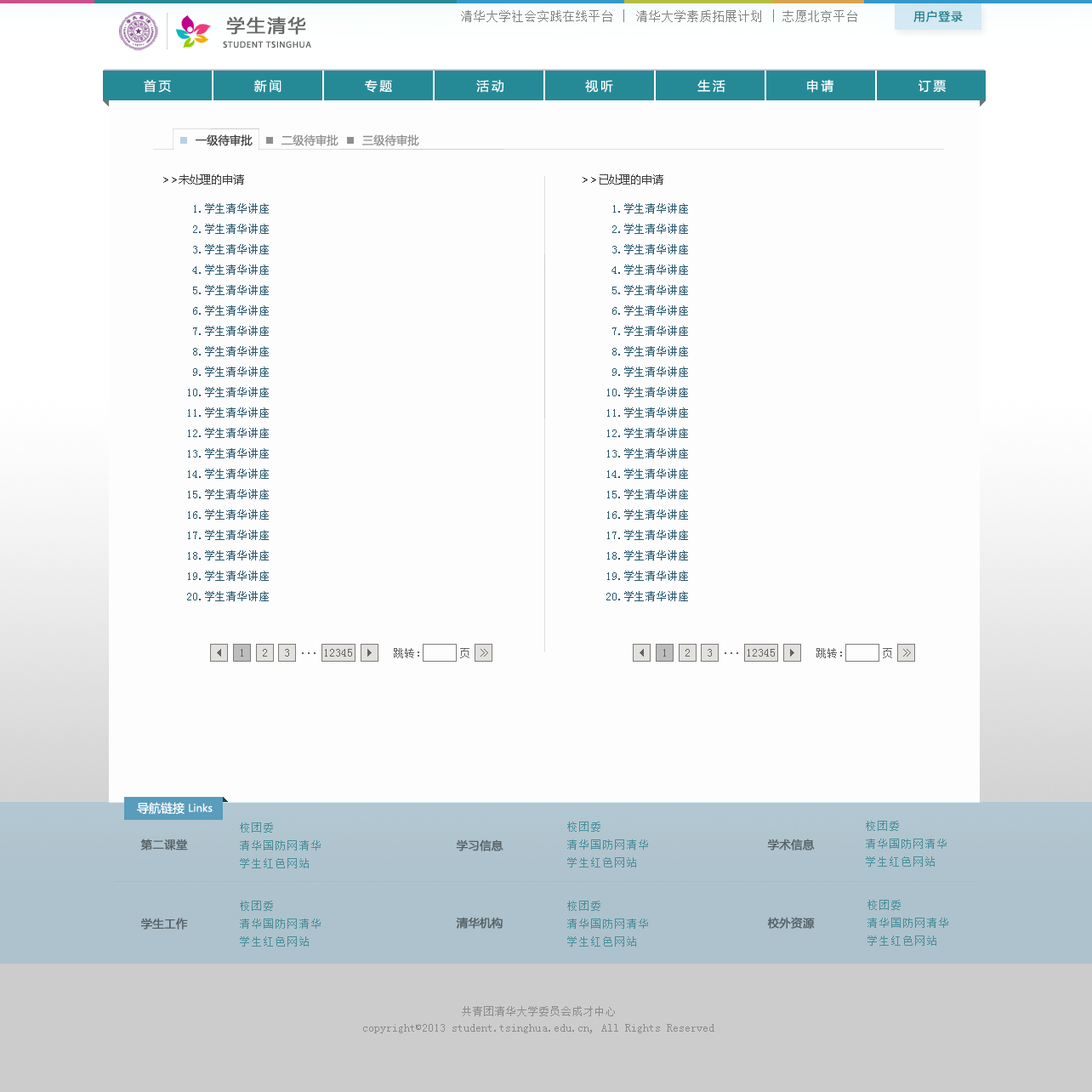
<style>
.page{position:relative;width:1092px;height:1092px;background:#fdfdfd}
.page>*{position:absolute;margin:0}
.t1{font:18.1px "MicrosoftYaHei";letter-spacing:0.1em;color:#666666;font-weight:bold}
.t2{font:11.9px "SimSun";letter-spacing:0.075em;color:#808080}
.t3{font:12.5px "SimSun";letter-spacing:0.075em;color:#808080}
.t4{font:11.3px "MicrosoftYaHei";letter-spacing:0.1em;color:#237e89}
.t5{font:9.1px "MyriadPro-Regular";letter-spacing:0.075em;color:#666666}
.t6{font:12.5px "MicrosoftYaHei";letter-spacing:0.2em;color:#ffffff}
.t7{font:11.3px "MicrosoftYaHei";color:#404040}
.t8{font:11.3px "MicrosoftYaHei";color:#8f8f8f}
.t9{font:11.3px "MicrosoftYaHei";letter-spacing:-0.01em;color:#404040}
.t10{font:11.3px/20.4px "SimSun";letter-spacing:-0.01em;color:#29586e}
.t11{font:11.3px "SimSun";color:#636363}
.t12{font:10.2px "MicrosoftYaHei";color:#ffffff}
.t13{font:11.9px "MicrosoftYaHei";color:#ffffff}
.t14{font:11.3px/18.1px "SimSun";letter-spacing:0.075em;color:#478d9a}
.t15{font:11.3px "MicrosoftYaHei";color:#586267;font-weight:bold}
.t16{font:11.3px/18.1px "SimSun";letter-spacing:0.075em;color:#478d99}
.t17{font:11.3px "MicrosoftYaHei";color:#566166;font-weight:bold}
.t18{font:11.3px/15.9px "SimSun";color:#8a8a8a}
</style>
<div class="page">
<p class="t1" style="left:226px;top:16px;width:80px;height:19px">学生清华</p>
<p class="t2" style="left:461px;top:9px;width:396px;height:13px">清华大学社会实践在线平台 <span class="t3">| </span>清华大学素质拓展计划 <span class="t3">| </span>志愿北京平台</p>
<p class="t4" style="left:913px;top:10px;width:50px;height:12px">用户登录</p>
<p class="t5" style="left:223px;top:41px;width:88px;height:7px">STUDENT TSINGHUA</p>
<p class="t6" style="left:144px;top:79px;width:27px;height:14px">首页</p>
<p class="t6" style="left:254px;top:79px;width:28px;height:14px">新闻</p>
<p class="t6" style="left:365px;top:80px;width:27px;height:13px">专题</p>
<p class="t6" style="left:476px;top:80px;width:27px;height:13px">活动</p>
<p class="t6" style="left:585px;top:80px;width:28px;height:13px">视听</p>
<p class="t6" style="left:697px;top:79px;width:28px;height:14px">生活</p>
<p class="t6" style="left:807px;top:79px;width:26px;height:14px">申请</p>
<p class="t6" style="left:918px;top:80px;width:28px;height:12px">订票</p>
<p class="t7" style="left:196px;top:134px;width:57px;height:12px">一级待审批</p>
<p class="t8" style="left:282px;top:134px;width:56px;height:12px">二级待审批</p>
<p class="t8" style="left:362px;top:134px;width:57px;height:12px">三级待审批</p>
<p class="t9" style="left:163px;top:174px;width:81px;height:11px">&gt;&gt;未处理的申请</p>
<p class="t9" style="left:583px;top:174px;width:80px;height:11px">&gt;&gt;已处理的申请</p>
<p class="t10" style="left:187px;top:203px;width:82px;height:398px">1.学生清华讲座<br> 2.学生清华讲座<br> 3.学生清华讲座<br> 4.学生清华讲座<br> 5.学生清华讲座<br> 6.学生清华讲座<br> 7.学生清华讲座<br> 8.学生清华讲座<br> 9.学生清华讲座<br>10.学生清华讲座<br>11.学生清华讲座<br>12.学生清华讲座<br>13.学生清华讲座<br>14.学生清华讲座<br>15.学生清华讲座<br>16.学生清华讲座<br>17.学生清华讲座<br>18.学生清华讲座<br>19.学生清华讲座<br>20.学生清华讲座</p>
<p class="t10" style="left:606px;top:203px;width:82px;height:398px">1.学生清华讲座<br> 2.学生清华讲座<br> 3.学生清华讲座<br> 4.学生清华讲座<br> 5.学生清华讲座<br> 6.学生清华讲座<br> 7.学生清华讲座<br> 8.学生清华讲座<br> 9.学生清华讲座<br>10.学生清华讲座<br>11.学生清华讲座<br>12.学生清华讲座<br>13.学生清华讲座<br>14.学生清华讲座<br>15.学生清华讲座<br>16.学生清华讲座<br>17.学生清华讲座<br>18.学生清华讲座<br>19.学生清华讲座<br>20.学生清华讲座</p>
<p class="t11" style="left:241px;top:649px;width:2px;height:8px">1</p>
<p class="t11" style="left:263px;top:649px;width:4px;height:8px">2</p>
<p class="t11" style="left:285px;top:649px;width:4px;height:8px">3</p>
<p class="t11" style="left:302px;top:652px;width:14px;height:2px">...</p>
<p class="t11" style="left:325px;top:649px;width:27px;height:8px">12345</p>
<p class="t11" style="left:394px;top:648px;width:25px;height:10px">跳转：</p>
<p class="t11" style="left:460px;top:648px;width:9px;height:10px">页</p>
<p class="t11" style="left:663px;top:649px;width:3px;height:8px">1</p>
<p class="t11" style="left:685px;top:649px;width:5px;height:8px">2</p>
<p class="t11" style="left:708px;top:649px;width:4px;height:8px">3</p>
<p class="t11" style="left:725px;top:652px;width:13px;height:2px">...</p>
<p class="t11" style="left:748px;top:649px;width:27px;height:8px">12345</p>
<p class="t11" style="left:816px;top:648px;width:26px;height:10px">跳转：</p>
<p class="t11" style="left:883px;top:648px;width:9px;height:10px">页</p>
<p class="t12" style="left:137px;top:802px;width:76px;height:13px"><span class="t13">导航链接 </span>Links</p>
<p class="t14" style="left:567px;top:822px;width:81px;height:45px">校团委<br>清华国防网清华<br>学生红色网站</p>
<p class="t14" style="left:866px;top:821px;width:81px;height:46px">校团委<br>清华国防网清华<br>学生红色网站</p>
<p class="t14" style="left:240px;top:822px;width:81px;height:46px">校团委<br>清华国防网清华<br>学生红色网站</p>
<p class="t15" style="left:140px;top:839px;width:48px;height:11px">第二课堂</p>
<p class="t15" style="left:456px;top:839px;width:47px;height:12px">学习信息</p>
<p class="t15" style="left:767px;top:839px;width:48px;height:11px">学术信息</p>
<p class="t16" style="left:240px;top:901px;width:81px;height:46px">校团委<br>清华国防网清华<br>学生红色网站</p>
<p class="t16" style="left:567px;top:901px;width:81px;height:46px">校团委<br>清华国防网清华<br>学生红色网站</p>
<p class="t16" style="left:867px;top:900px;width:81px;height:46px">校团委<br>清华国防网清华<br>学生红色网站</p>
<p class="t17" style="left:140px;top:918px;width:48px;height:12px">学生工作</p>
<p class="t17" style="left:456px;top:917px;width:47px;height:12px">清华机构</p>
<p class="t17" style="left:767px;top:917px;width:48px;height:12px">校外资源</p>
<p class="t18" style="left:363px;top:1006px;width:351px;height:27px;text-align:center">共青团清华大学委员会成才中心<br>copyright©2013 student.tsinghua.edu.cn, All Rights Reserved</p>
</div>
